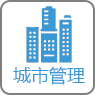
<style>
.page{position:relative;width:95px;height:95px;background:#ffffff}
.page>*{position:absolute;margin:0}
.t1{font:18px "MicrosoftYaHei";color:#3998d6}
</style>
<div class="page">
<p class="t1" style="left:13px;top:66px;width:72px;height:19px">城市管理</p>
</div>
